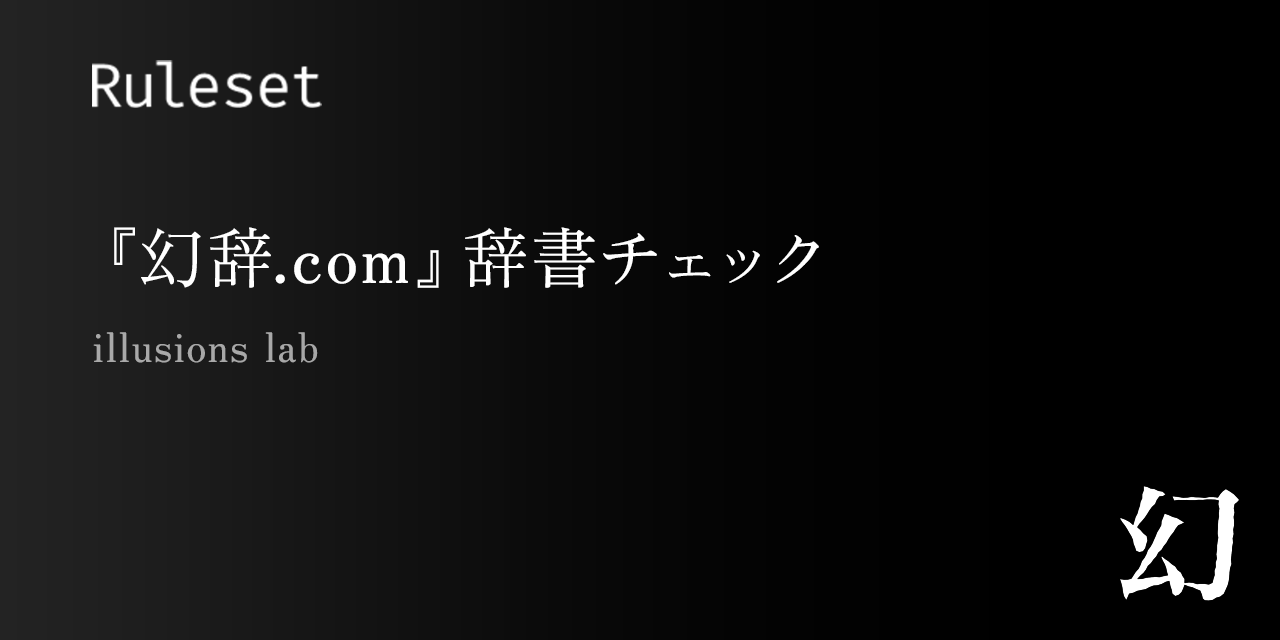
<style>
.page{position:relative;width:1280px;height:640px;background:#000000}
.page>*{position:absolute;margin:0}
.t1{font:66.7px "ZenOldMincho-Regular";letter-spacing:0.05em;color:#ffffff}
.t2{font:9.8px "ZenOldMincho-Regular";letter-spacing:0.05em;color:#a8a8a8}
</style>
<div class="page">
<p class="t1" style="left:114px;top:227px;width:705px;height:61px">『幻辞.com』辞書チェック</p>
<p class="t2" style="left:93px;top:332px;width:225px;height:31px">illusions lab</p>
</div>
